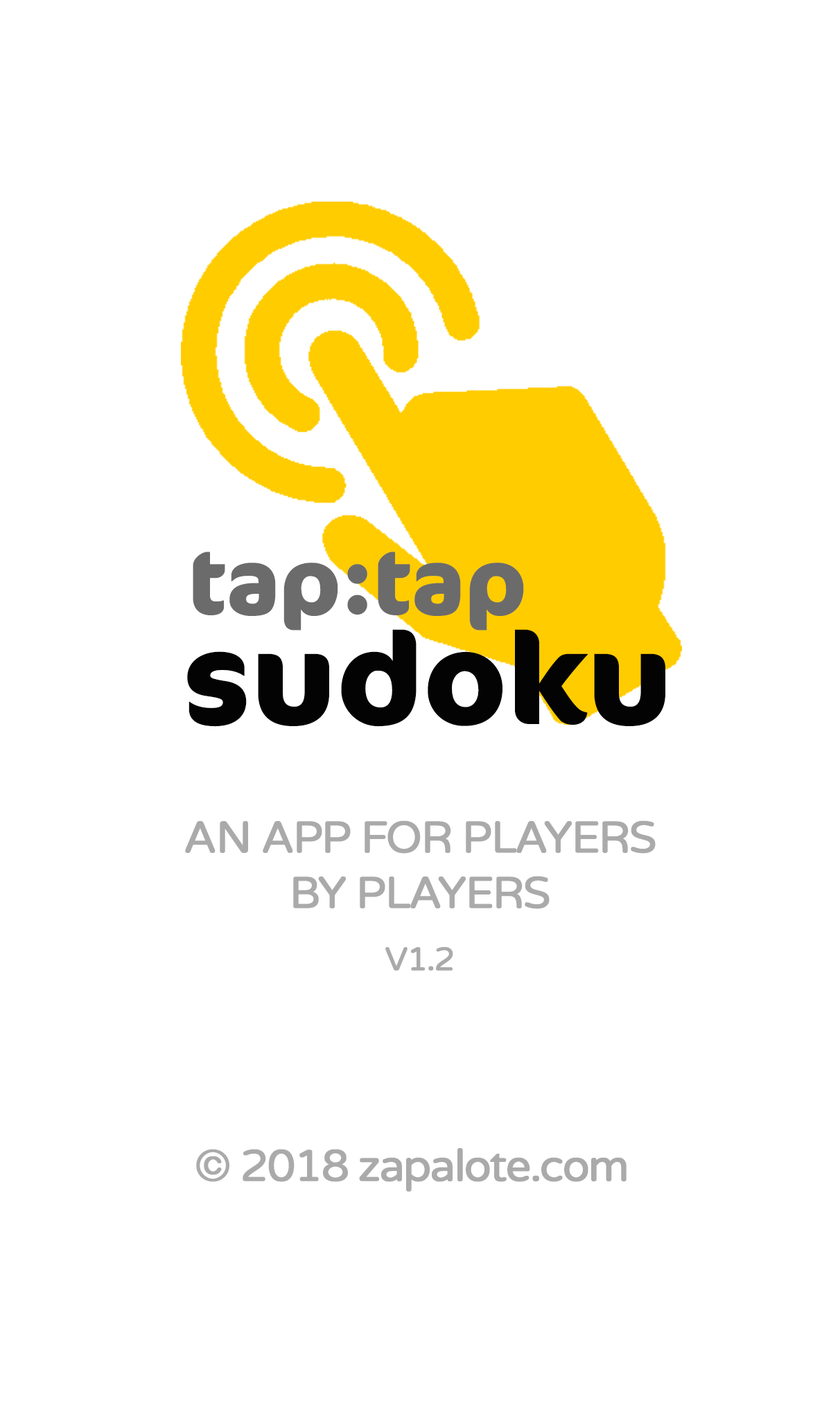
<style>
.page{position:relative;width:840px;height:1419px;background:#ffffff}
.page>*{position:absolute;margin:0}
.t1{font:91.6px "Cocon-Bold";color:#6b6b6b}
.t2{font:127.7px "Cocon-Bold";color:#030303}
.t3{font:44.4px/55.4px "VarelaRound-Regular";letter-spacing:-0.05em;color:#aaaaaa;font-weight:bold}
.t4{font:32.6px "VarelaRound-Regular";letter-spacing:-0.05em;color:#aaaaaa;font-weight:bold}
.t5{font:44.4px "VarelaRound-Regular";letter-spacing:-0.05em;color:#aaaaaa;font-weight:bold}
</style>
<div class="page">
<p class="t1" style="left:193px;top:552px;width:331px;height:79px">tap:tap</p>
<p class="t2" style="left:187px;top:629px;width:478px;height:98px">sudoku</p>
<p class="t3" style="left:185px;top:821px;width:471px;height:88px;text-align:center">AN APP FOR PLAYERS<br>BY PLAYERS</p>
<p class="t4" style="left:385px;top:947px;width:68px;height:24px">V1.2</p>
<p class="t5" style="left:196px;top:1148px;width:431px;height:44px">© 2018 zapalote.com</p>
</div>
